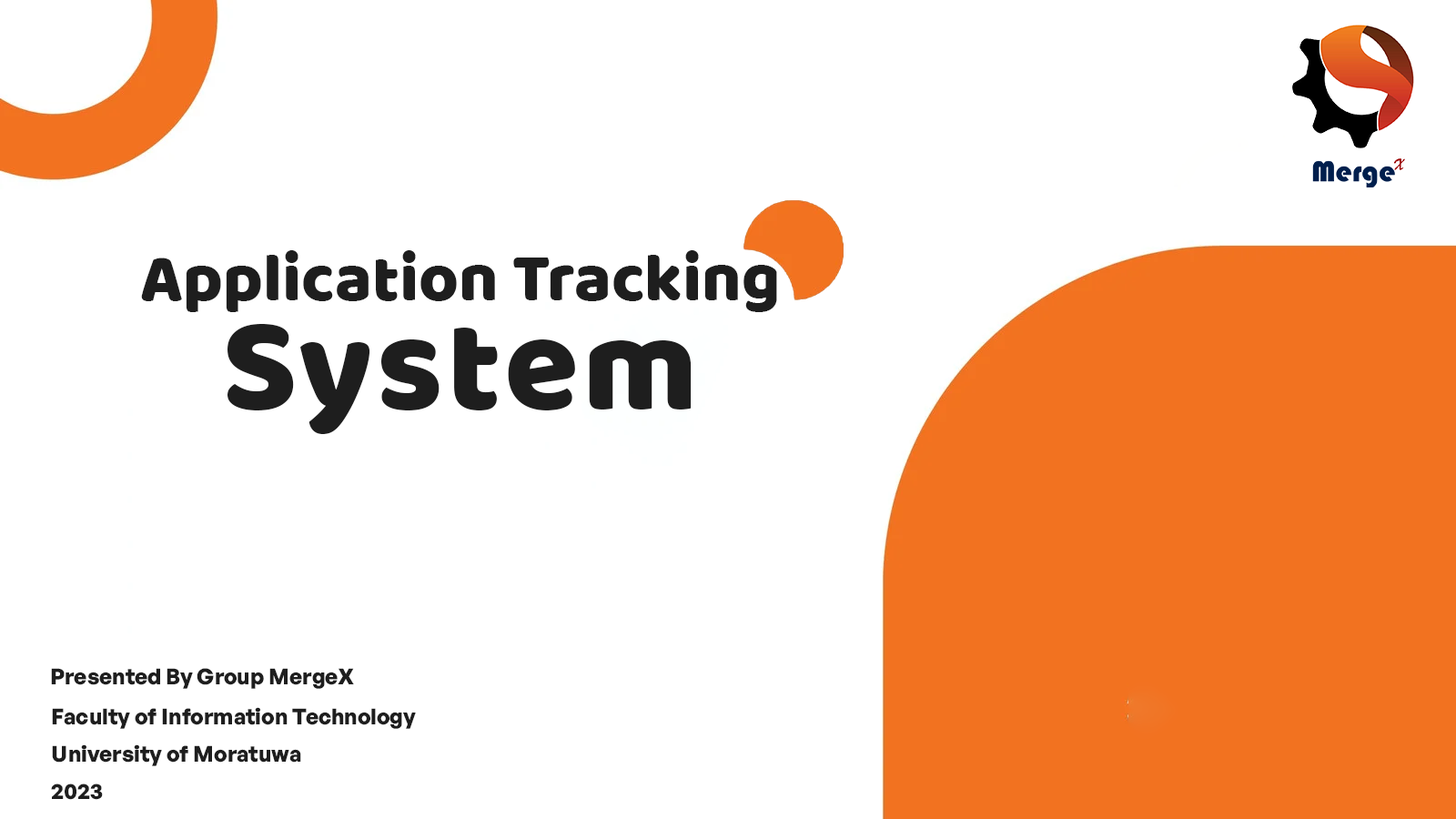
<style>
.page{position:relative;width:1456px;height:819px;background:#ffffff}
.page>*{position:absolute;margin:0}
.t1{font:68.2px "Baloo-Regular";color:#1e1e1e}
.t2{font:136.5px "Baloo-Regular";letter-spacing:0.025em;color:#1e1e1e}
.t3{font:21.8px "GeneralSans-Bold";color:#1e1e1e}
</style>
<div class="page">
<p class="t1" style="left:141px;top:250px;width:636px;height:62px">Application Tracking</p>
<p class="t2" style="left:227px;top:324px;width:465px;height:110px">System</p>
<p class="t3" style="left:51px;top:668px;width:303px;height:21px">Presented By Group MergeX</p>
<p class="t3" style="left:52px;top:707px;width:364px;height:22px">Faculty of Information Technology</p>
<p class="t3" style="left:52px;top:744px;width:249px;height:22px">University of Moratuwa</p>
<p class="t3" style="left:51px;top:783px;width:52px;height:17px">2023</p>
</div>
